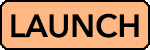
<style>
.page{position:relative;width:150px;height:50px;background:#ffb883}
.page>*{position:absolute;margin:0}
.t1{font:32px "AvenirNextLTPro-Demi";color:#000000}
</style>
<div class="page">
<p class="t1" style="left:11px;top:13px;width:128px;height:25px">LAUNCH</p>
</div>
